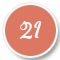
<style>
.page{position:relative;width:60px;height:60px;background:#dc7861}
.page>*{position:absolute;margin:0}
.t1{font:25px "laChatteMaman";color:#f8f8f8}
</style>
<div class="page">
<p class="t1" style="left:20px;top:21px;width:22px;height:18px">21</p>
</div>
